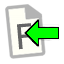
<style>
.page{position:relative;width:64px;height:64px;background:#ffffff}
.page>*{position:absolute;margin:0}
.t1{font:35.3px "AlibabaPuHuiTiR";color:#646464;font-weight:bold}
</style>
<div class="page">
<p class="t1" style="left:17px;top:23px;width:15px;height:27px;rotate:-5deg">F</p>
</div>
